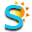
<style>
.page{position:relative;width:32px;height:32px;background:#ffffff}
.page>*{position:absolute;margin:0}
.t1{font:38px "LucidaConsole";color:#10c7f5}
</style>
<div class="page">
<p class="t1" style="left:5px;top:5px;width:18px;height:24px">S</p>
</div>
